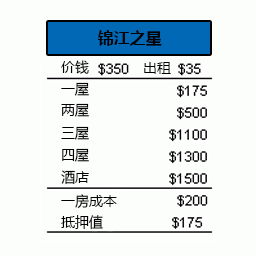
<style>
.page{position:relative;width:256px;height:256px;background:#fcfefc}
.page>*{position:absolute;margin:0}
.t1{font:16px "MicrosoftYaHei-Bold";color:#000000}
.t2{font:14px "MicrosoftYaHei";color:#000000}
</style>
<div class="page">
<p class="t1" style="left:98px;top:30px;width:64px;height:16px">锦江之星</p>
<p class="t2" style="left:61px;top:60px;width:28px;height:14px">价钱</p>
<p class="t2" style="left:144px;top:62px;width:27px;height:12px">出租</p>
<p class="t2" style="left:61px;top:82px;width:28px;height:14px">一屋</p>
<p class="t2" style="left:61px;top:103px;width:28px;height:14px">两屋</p>
<p class="t2" style="left:61px;top:126px;width:28px;height:14px">三屋</p>
<p class="t2" style="left:62px;top:148px;width:27px;height:14px">四屋</p>
<p class="t2" style="left:61px;top:170px;width:28px;height:15px">酒店</p>
<p class="t2" style="left:61px;top:194px;width:56px;height:15px">一房成本</p>
<p class="t2" style="left:61px;top:215px;width:42px;height:15px">抵押值</p>
</div>
